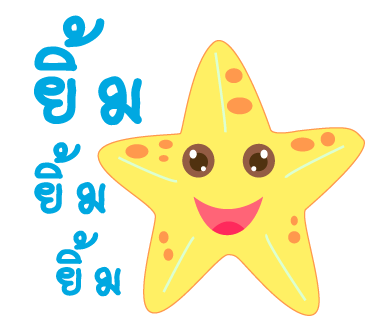
<style>
.page{position:relative;width:370px;height:320px;background:#ffffff}
.page>*{position:absolute;margin:0}
.t1{font:132px "2005_iannnnnMTV";letter-spacing:0.03em;color:#00a8e1;scale:1.06 1}
.t2{font:87px "2005_iannnnnMTV";letter-spacing:0.03em;color:#00a8e1;scale:1.06 1}
.t3{font:79px "2005_iannnnnMTV";letter-spacing:0.03em;color:#00a8e1;scale:1.06 1}
</style>
<div class="page">
<p class="t1" style="left:34px;top:15px;width:108px;height:111px">ยิ้ม</p>
<p class="t2" style="left:34px;top:142px;width:72px;height:73px">ยิ้ม</p>
<p class="t3" style="left:56px;top:230px;width:65px;height:67px">ยิ้ม</p>
</div>
